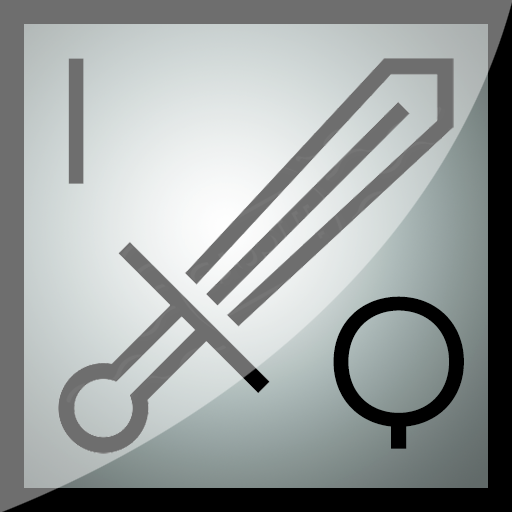
<style>
.page{position:relative;width:512px;height:512px}
.page>*{position:absolute;margin:0}
.t1{font:178.9px "Novecentosanswide-Normal";letter-spacing:0.04em;color:#6e6e6e}
.t2{font:178.9px "Novecentosanswide-Normal";letter-spacing:0.04em;color:#000000}
</style>
<div class="page">
<p class="t1" style="left:68px;top:58px;width:16px;height:126px">I</p>
<p class="t2" style="left:333px;top:296px;width:131px;height:153px">Q</p>
</div>
